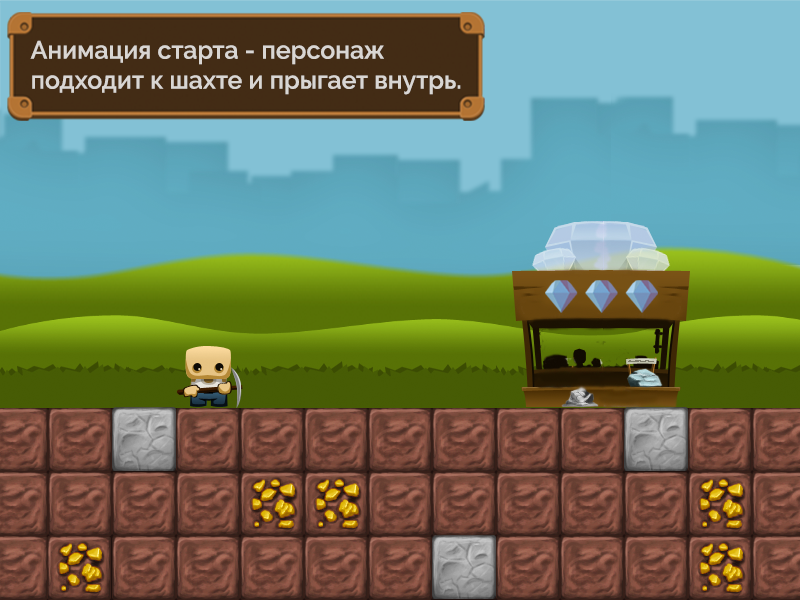
<style>
.page{position:relative;width:800px;height:600px}
.page>*{position:absolute;margin:0}
.t1{font:25px "Raleway-SemiBold";color:#d9d6d3}
</style>
<div class="page">
<p class="t1" style="left:30px;top:40px;width:431px;height:55px">Анимация старта - персонаж <br>подходит к шахте и прыгает внутрь.</p>
</div>
